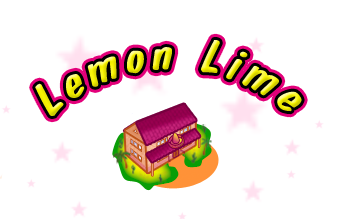
<style>
.page{position:relative;width:340px;height:219px;background:#ffffff}
.page>*{position:absolute;margin:0}
.t1{font:48.9px "DomCasualBT-Regular";letter-spacing:0.095em;font-style:italic}
</style>
<div class="page">
<p class="t1" style="left:35px;top:40px;width:267px;height:76px;rotate:-1deg">Lemon Lime</p>
</div>
